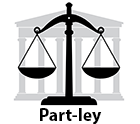
<style>
.page{position:relative;width:140px;height:124px;background:#ffffff}
.page>*{position:absolute;margin:0}
.t1{font:18px "MyriadPro-Bold";color:#000000}
</style>
<div class="page">
<p class="t1" style="left:40px;top:108px;width:62px;height:17px">Part-ley</p>
</div>
